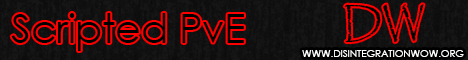
<style>
.page{position:relative;width:468px;height:60px}
.page>*{position:absolute;margin:0}
.t1{font:40px "Papyrus-Regular";letter-spacing:-0.01em;color:#000000}
.t2{font:40px "CenturyGothic";letter-spacing:-0.01em;color:#000000}
.t3{font:10px "CenturyGothic";letter-spacing:-0.01em;color:#ffffff}
</style>
<div class="page">
<p class="t1" style="left:344px;top:4px;width:80px;height:39px">DW</p>
<p class="t2" style="left:11px;top:13px;width:233px;height:38px">Scripted PvE</p>
<p class="t3" style="left:302px;top:50px;width:162px;height:7px">WWW.DISINTEGRATIONWOW.ORG</p>
</div>
